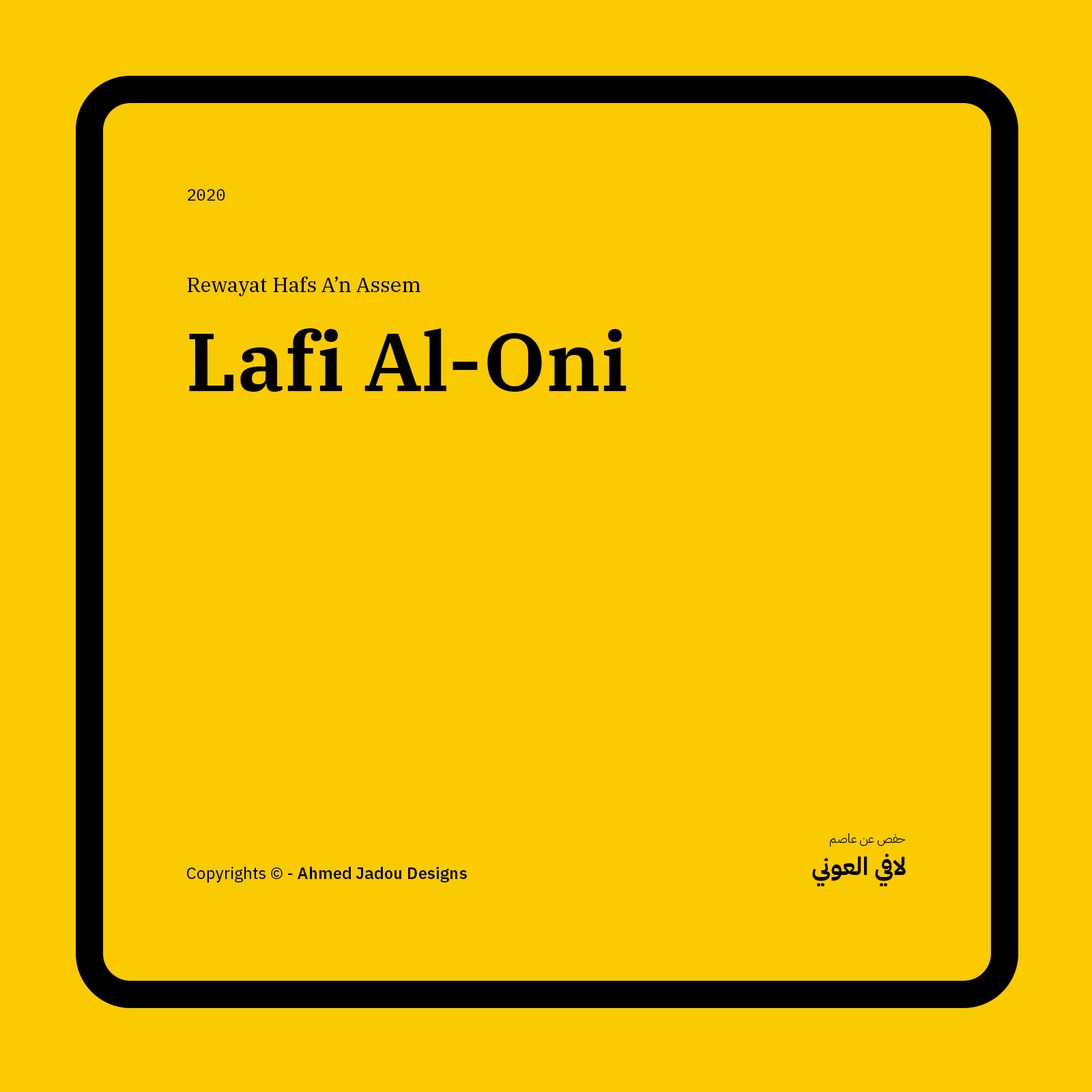
<style>
.page{position:relative;width:1092px;height:1092px;background:#facb00}
.page>*{position:absolute;margin:0}
.t1{font:16.4px "IBMPlexMono-Text";color:#000000}
.t2{font:20.5px "IBMPlexSerif-Text";color:#000000}
.t3{font:81.9px "IBMPlexSerif-SemiBold";color:#000000}
.t4{font:12.3px "IBMPlexArabic-Light";color:#000000}
.t5{font:24.6px "IBMPlexArabic-Bold";color:#000000}
.t6{font:16.4px "IBMPlexSans-SemiBold";color:#000000}
.t7{font:16.4px "IBMPlexSans-Text";color:#000000}
</style>
<div class="page">
<p class="t1" style="left:188px;top:189px;width:37px;height:12px">2020</p>
<p class="t2" style="left:187px;top:276px;width:233px;height:20px">Rewayat Hafs A’n Assem</p>
<p class="t3" style="left:189px;top:328px;width:438px;height:64px">Lafi Al-Oni</p>
<p class="t4" style="left:830px;top:833px;width:76px;height:14px">حفص عن عاصم</p>
<p class="t5" style="left:812px;top:854px;width:94px;height:33px">لافي العوني</p>
<p class="t6" style="left:187px;top:867px;width:280px;height:15px"><span class="t7">Copyrights © - </span>Ahmed Jadou Designs</p>
</div>
